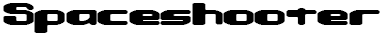
<style>
.page{position:relative;width:383px;height:36px;background:#ffffff}
.page>*{position:absolute;margin:0}
.t1{font:33.3px "MacropsiaBRK";color:#000000}
</style>
<div class="page">
<p class="t1" style="left:3px;top:3px;width:377px;height:30px">Spaceshooter</p>
</div>
